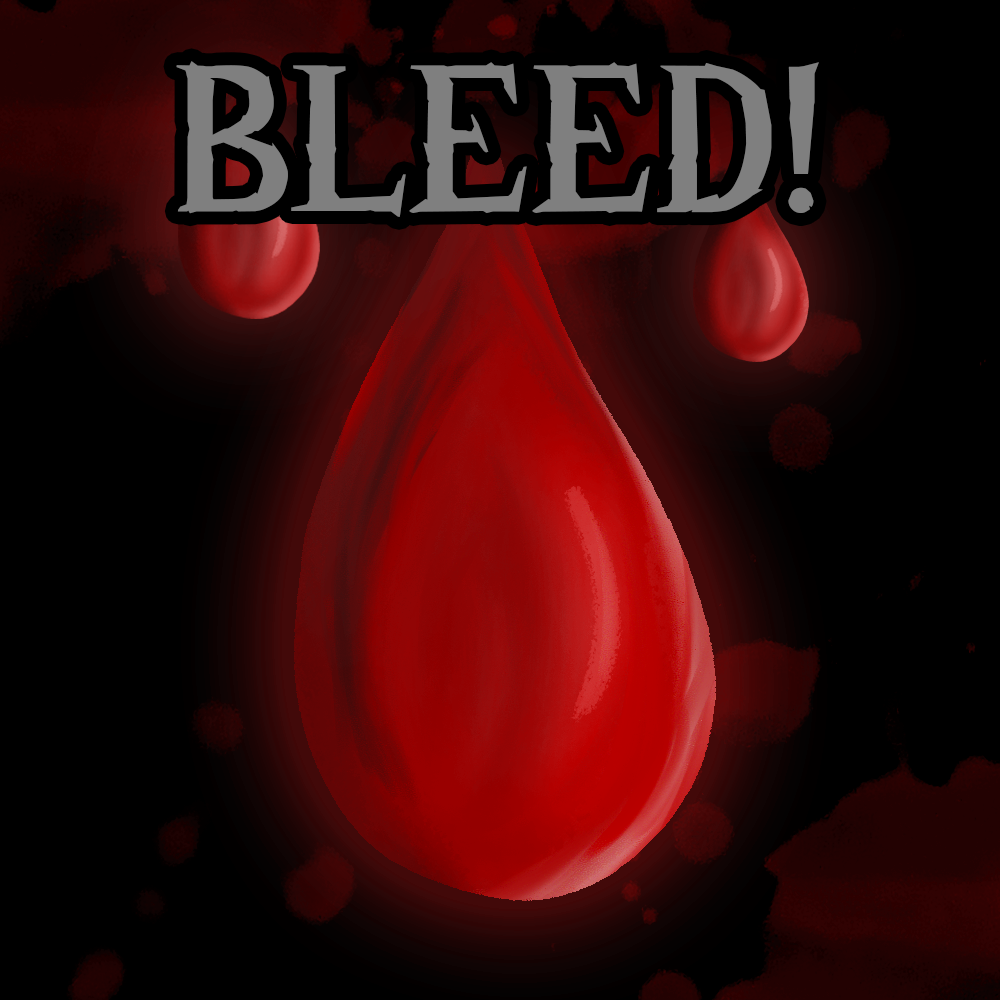
<style>
.page{position:relative;width:1000px;height:1000px;background:#000000}
.page>*{position:absolute;margin:0}
.t1{font:227px "KONSTANTINERegular";color:#7f7f7f}
</style>
<div class="page">
<p class="t1" style="left:176px;top:61px;width:643px;height:156px">bleed!</p>
</div>
